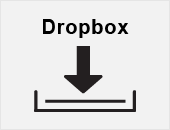
<style>
.page{position:relative;width:170px;height:130px;background:#f2f2f2}
.page>*{position:absolute;margin:0}
.t1{font:20px "Arial-BoldMT";letter-spacing:0.04em;color:#000000}
</style>
<div class="page">
<p class="t1" style="left:43px;top:19px;width:86px;height:19px">Dropbox</p>
</div>
